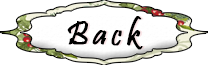
<style>
.page{position:relative;width:208px;height:65px;background:#ffffff}
.page>*{position:absolute;margin:0}
.t1{font:34px "Pristina-Regular";letter-spacing:0.125em;color:#000000;font-weight:bold}
.t2{font:34px "Pristina-Regular";letter-spacing:0.125em;font-weight:bold}
</style>
<div class="page">
<p class="t1" style="left:67px;top:16px;width:76px;height:34px">Back</p>
<p class="t2" style="left:69px;top:16px;width:76px;height:34px">Back</p>
</div>
